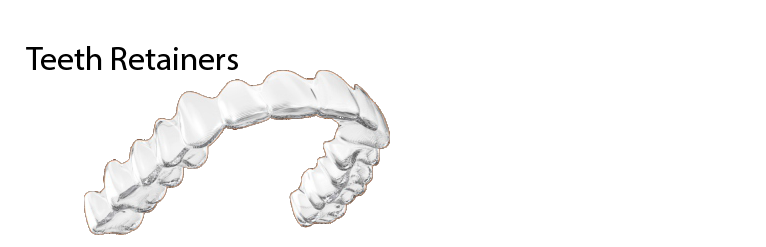
<style>
.page{position:relative;width:766px;height:247px;background:#ffffff}
.page>*{position:absolute;margin:0}
.t1{font:12px "MyriadHebrew-Regular";color:#000000}
</style>
<div class="page">
<p class="t1" style="left:26px;top:46px;width:212px;height:24px">Teeth Retainers</p>
</div>
